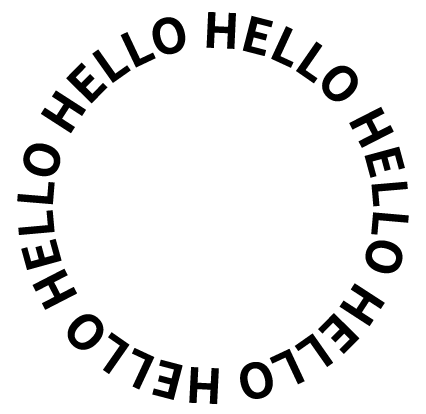
<style>
.page{position:relative;width:426px;height:414px;background:#ffffff}
.page>*{position:absolute;margin:0}
.t1{font:48px "NotoSansKR-Bold";color:#000000}
</style>
<div class="page">
<p class="t1" style="left:17px;top:12px;width:392px;height:393px">HELLO HELLO HELLO HELLO HELLO HELLO</p>
</div>
